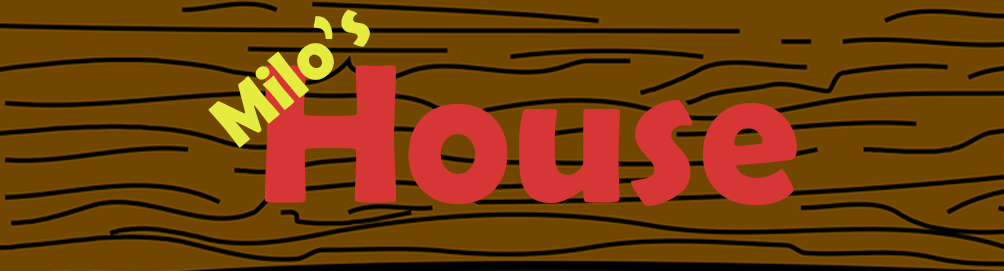
<style>
.page{position:relative;width:1004px;height:271px;background:#714600}
.page>*{position:absolute;margin:0}
.t1{font:72px "BerlinSansFBDemi-Bold";color:#e6ec3f}
.t2{font:200px "BerlinSansFBDemi-Bold";color:#d63636}
</style>
<div class="page">
<p class="t1" style="left:208px;top:9px;width:162px;height:139px;rotate:-40deg">Milo’s</p>
<p class="t2" style="left:264px;top:65px;width:533px;height:141px">House</p>
</div>
